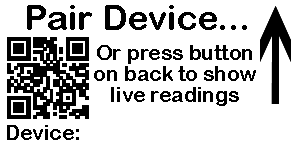
<style>
.page{position:relative;width:296px;height:152px;background:#ffffff}
.page>*{position:absolute;margin:0}
.t1{font:35.4px "ArialRoundedMTBold";color:#000000}
.t2{font:20.8px/20.8px "ArialRoundedMTBold";color:#000000}
.t3{font:20.8px "ArialRoundedMTBold";color:#000000}
</style>
<div class="page">
<p class="t1" style="left:27px;top:5px;width:220px;height:25px">Pair Device...</p>
<p class="t2" style="left:94px;top:45px;width:162px;height:61px;text-align:center">Or press button on back to show live readings</p>
<p class="t2" style="left:94px;top:45px;width:162px;height:61px;text-align:center">Or press button on back to show live readings</p>
<p class="t2" style="left:94px;top:45px;width:162px;height:61px;text-align:center">Or press button on back to show live readings</p>
<p class="t3" style="left:7px;top:125px;width:72px;height:15px">Device:</p>
</div>
